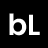
<style>
.page{position:relative;width:48px;height:48px;background:#000000}
.page>*{position:absolute;margin:0}
.t1{font:29.1px "Poppins-SemiBold";color:#ffffff}
</style>
<div class="page">
<p class="t1" style="left:9px;top:13px;width:31px;height:23px">bL</p>
</div>
